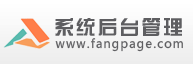
<style>
.page{position:relative;width:193px;height:64px}
.page>*{position:absolute;margin:0}
.t1{font:19.8px "FZZYJW--GB1-0";letter-spacing:0.1em;color:#5e5e61}
.t2{font:12px "MicrosoftYaHei";letter-spacing:0.1em;color:#5e5e61}
</style>
<div class="page">
<p class="t1" style="left:55px;top:18px;width:127px;height:18px">系统后台管理</p>
<p class="t2" style="left:55px;top:38px;width:128px;height:14px">www.fangpage.com</p>
</div>
